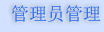
<style>
.page{position:relative;width:104px;height:32px;background:#d1e1ff}
.page>*{position:absolute;margin:0}
.t1{font:18px "SimSun";color:#1a66fd}
</style>
<div class="page">
<p class="t1" style="left:12px;top:5px;width:89px;height:17px">管理员管理</p>
</div>
